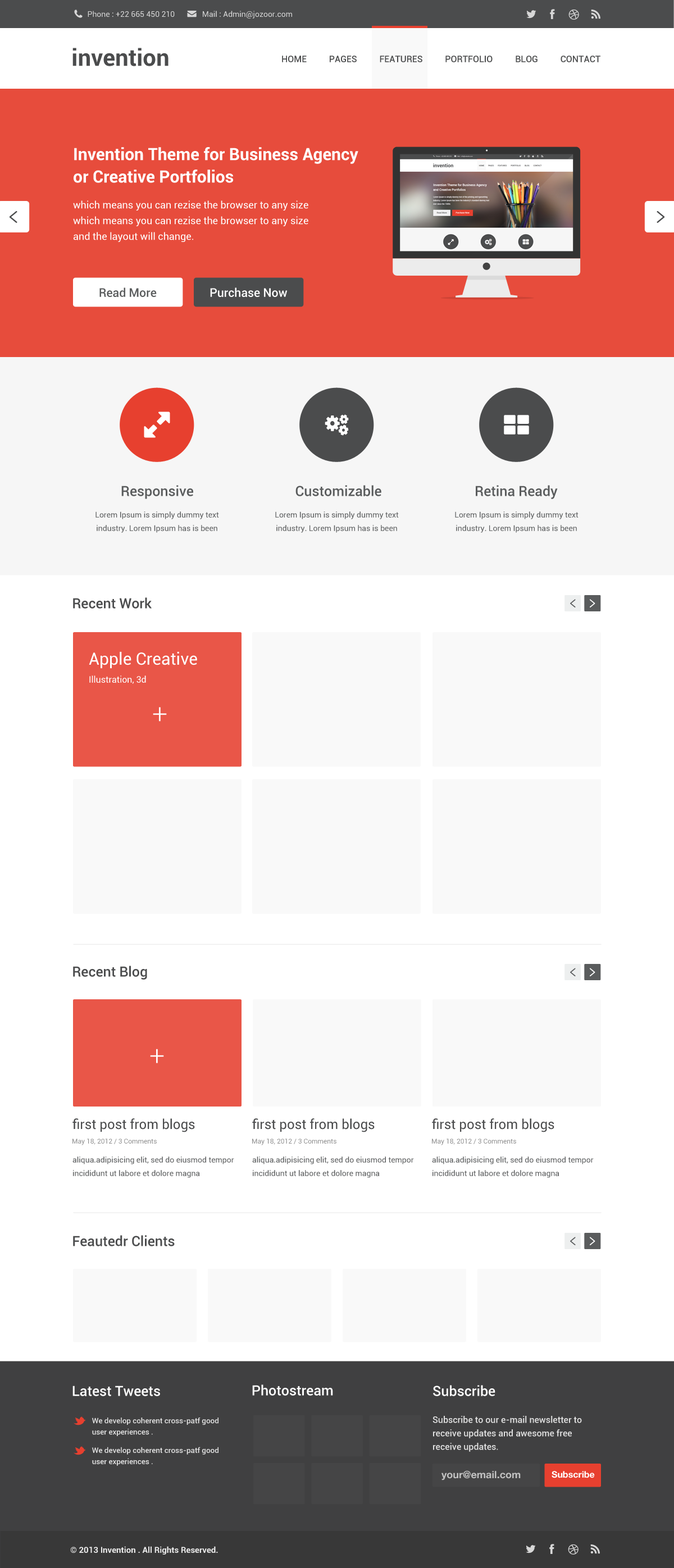
<style>
.page{position:relative;width:674px;height:1568px;background:#ffffff}
.page>*{position:absolute;margin:0}
.t1{font:7.9px "Roboto-Regular";color:#d7d7d7}
.t2{font:9px "Roboto-Medium";color:#4b4c4d}
.t3{font:10.1px/15.7px "Roboto-Regular";color:#ffffff}
.t4{font:16.8px/22.5px "Roboto-Bold";color:#ffffff}
.t5{font:12px "Roboto-Medium";color:#5a5c5d}
.t6{font:12px "Roboto-Medium";color:#ffffff}
.t7{font:14px "Roboto-Medium";color:#5a5c5d}
.t8{font:15.7px "Roboto-Medium";color:#5a5c5d}
.t9{font:7.9px/13.5px "Roboto-Regular";color:#5a5c5d}
.t10{font:14px "Roboto-Medium";color:#4b4c4d}
.t11{font:16.8px "Roboto-Regular";color:#ffffff}
.t12{font:9px "Roboto-Regular";color:#ffffff}
.t13{font:26.9px "Roboto-Light";color:#ffffff}
.t14{font:13.5px "Roboto-Regular";color:#4b4c4d}
.t15{font:6.7px "Roboto-Regular";color:#929292}
.t16{font:14px "Roboto-Medium";color:#ffffff}
.t17{font:9px/13.5px "Roboto-Medium";color:#e1e1e1}
.t18{font:14px/16.1px "Roboto-Medium";color:#ffffff}
.t19{font:7.5px/11.3px "Roboto-Medium";color:#e1e1e1}
.t20{font:13.5px/3.8px "Roboto-Bold";color:#ffffff}
.t21{font:10.1px "HelveticaNeue-Bold";color:#c2c2c2}
.t22{font:9px "HelveticaNeue-Bold";color:#ffffff}
.t23{font:8.4px "Roboto-Bold";color:#eaeaea}
</style>
<div class="page">
<p class="t1" style="left:88px;top:11px;width:204px;height:8px">Phone : +22 665 450 210              Mail : Admin@jozoor.com</p>
<p class="t2" style="left:282px;top:56px;width:318px;height:6px">HOME          PAGES          FEATURES          PORTFOLIO          BLOG          CONTACT</p>
<p class="t3" style="left:73px;top:147px;width:285px;height:95px"><span class="t4">Invention Theme for Business Agency <br>or Creative Portfolios<br><br></span>which means you can rezise the browser to any size<br>which means you can rezise the browser to any size <br>and the layout will change.</p>
<p class="t5" style="left:99px;top:287px;width:58px;height:10px">Read More</p>
<p class="t6" style="left:210px;top:287px;width:77px;height:10px">Purchase Now</p>
<p class="t7" style="left:121px;top:485px;width:72px;height:14px">Responsive</p>
<p class="t7" style="left:295px;top:485px;width:86px;height:11px"><span class="t8"> </span>Customizable</p>
<p class="t7" style="left:476px;top:485px;width:81px;height:14px">Retina Ready</p>
<p class="t9" style="left:95px;top:511px;width:124px;height:22px;text-align:center">Lorem Ipsum is simply dummy text industry. Lorem Ipsum has is been</p>
<p class="t9" style="left:275px;top:511px;width:124px;height:22px;text-align:center">Lorem Ipsum is simply dummy text industry. Lorem Ipsum has is been</p>
<p class="t9" style="left:455px;top:511px;width:123px;height:22px;text-align:center">Lorem Ipsum is simply dummy text industry. Lorem Ipsum has is been</p>
<p class="t10" style="left:73px;top:597px;width:79px;height:12px">Recent Work</p>
<p class="t11" style="left:89px;top:652px;width:108px;height:17px">Apple Creative</p>
<p class="t12" style="left:89px;top:675px;width:57px;height:9px">Illustration, 3d</p>
<p class="t13" style="left:153px;top:707px;width:14px;height:14px">+</p>
<p class="t10" style="left:73px;top:966px;width:74px;height:14px">Recent Blog</p>
<p class="t13" style="left:150px;top:1049px;width:14px;height:14px">+</p>
<p class="t14" style="left:72px;top:1118px;width:123px;height:14px">first post from blogs</p>
<p class="t14" style="left:252px;top:1118px;width:122px;height:14px">first post from blogs</p>
<p class="t14" style="left:432px;top:1118px;width:122px;height:14px">first post from blogs</p>
<p class="t15" style="left:72px;top:1139px;width:85px;height:6px">May 18, 2012 / 3 Comments</p>
<p class="t15" style="left:252px;top:1139px;width:84px;height:6px">May 18, 2012 / 3 Comments</p>
<p class="t15" style="left:432px;top:1139px;width:84px;height:6px">May 18, 2012 / 3 Comments</p>
<p class="t9" style="left:72px;top:1156px;width:162px;height:22px">aliqua.adipisicing elit, sed do eiusmod tempor <br>incididunt ut labore et dolore magna</p>
<p class="t9" style="left:252px;top:1156px;width:162px;height:22px">aliqua.adipisicing elit, sed do eiusmod tempor <br>incididunt ut labore et dolore magna</p>
<p class="t9" style="left:432px;top:1156px;width:161px;height:22px">aliqua.adipisicing elit, sed do eiusmod tempor <br>incididunt ut labore et dolore magna</p>
<p class="t10" style="left:73px;top:1235px;width:102px;height:11px">Feautedr Clients</p>
<p class="t16" style="left:72px;top:1386px;width:88px;height:10px">Latest Tweets</p>
<p class="t16" style="left:252px;top:1384px;width:81px;height:12px">Photostream</p>
<p class="t17" style="left:432px;top:1385px;width:150px;height:67px"><span class="t18">Subscribe<br><br><br><br></span>Subscribe to our e-mail newsletter to<br>receive updates and awesome free<br>receive updates.</p>
<p class="t19" style="left:92px;top:1418px;width:126px;height:48px"><span class="t20"><br>        </span>We develop coherent cross-patf good<br>        user experiences .<br><br>        We develop coherent cross-patf good<br>        user experiences .</p>
<p class="t21" style="left:441px;top:1470px;width:79px;height:10px">your@email.com</p>
<p class="t22" style="left:551px;top:1471px;width:44px;height:7px">Subscribe</p>
<p class="t23" style="left:70px;top:1546px;width:148px;height:9px">© 2013 Invention . All Rights Reserved.</p>
</div>
